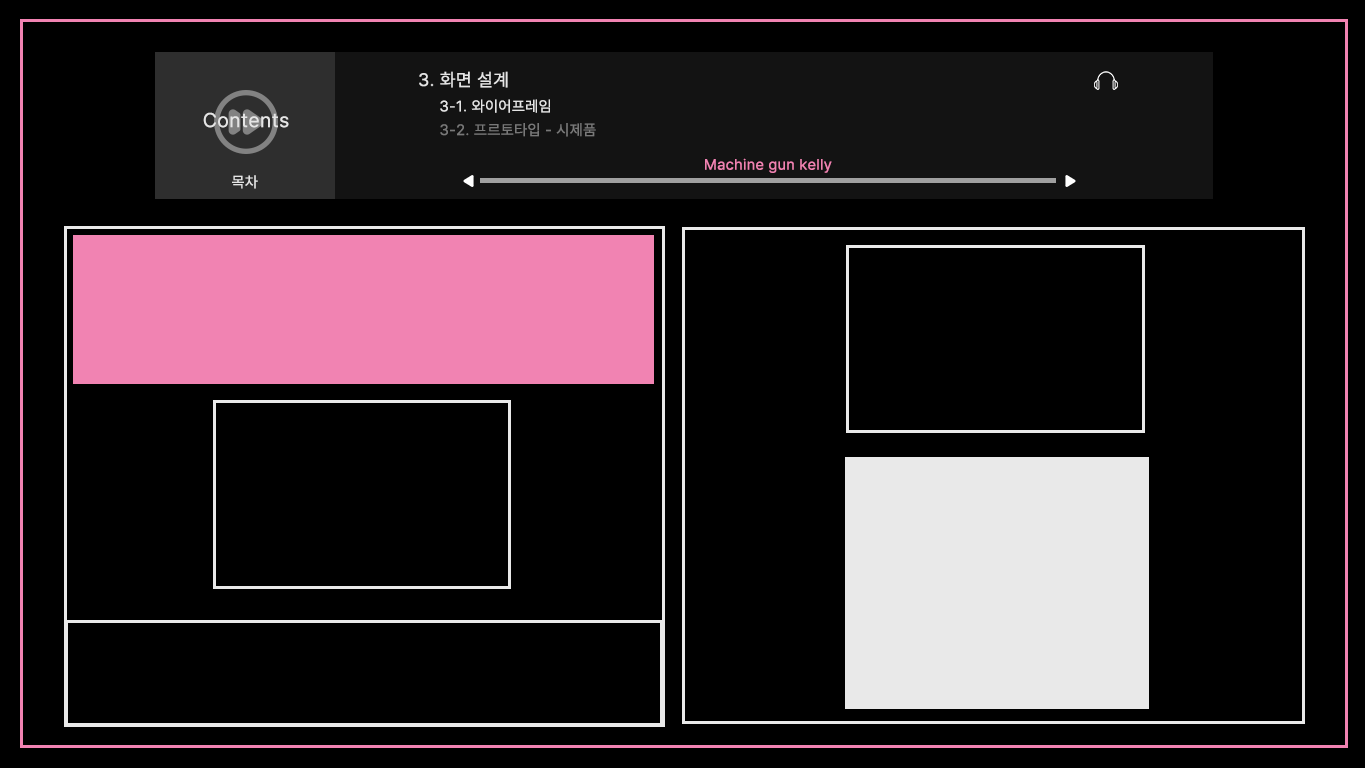
<style>
.page{position:relative;width:1365px;height:768px;background:#000000}
.page>*{position:absolute;margin:0}
.t1{font:18px "Pretendard-Regular";letter-spacing:0.03em;color:#e5e5e5}
.t2{font:15px "Pretendard-Regular";letter-spacing:0.03em;color:#e5e5e5}
.t3{font:20px "Pretendard-Regular";letter-spacing:0.03em;color:#e5e5e5}
.t4{font:15px "Pretendard-Regular";letter-spacing:0.03em;color:#787878}
.t5{font:15px "Pretendard-Regular";letter-spacing:0.03em;color:#f183b2}
</style>
<div class="page">
<p class="t1" style="left:419px;top:71px;width:89px;height:17px">3. 화면 설계</p>
<p class="t2" style="left:440px;top:99px;width:110px;height:14px">3-1. 와이어프레임</p>
<p class="t3" style="left:203px;top:112px;width:86px;height:16px">Contents</p>
<p class="t4" style="left:440px;top:123px;width:156px;height:14px">3-2. 프르토타입 - 시제품</p>
<p class="t5" style="left:705px;top:158px;width:127px;height:15px">Machine gun kelly</p>
<p class="t2" style="left:232px;top:175px;width:26px;height:14px">목차</p>
</div>
